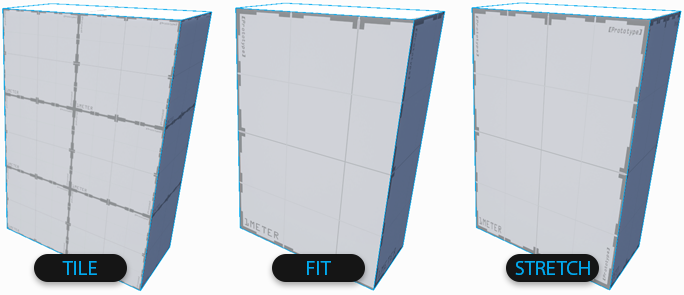
<style>
.page{position:relative;width:684px;height:295px;background:#fcfcfc}
.page>*{position:absolute;margin:0}
.t1{font:15.4px "MyriadPro-Regular";color:#00aaef;text-transform:uppercase}
</style>
<div class="page">
<p class="t1" style="left:62px;top:261px;width:35px;height:14px">Tile</p>
<p class="t1" style="left:307px;top:261px;width:24px;height:14px">Fit</p>
<p class="t1" style="left:515px;top:261px;width:75px;height:14px">Stretch</p>
</div>
